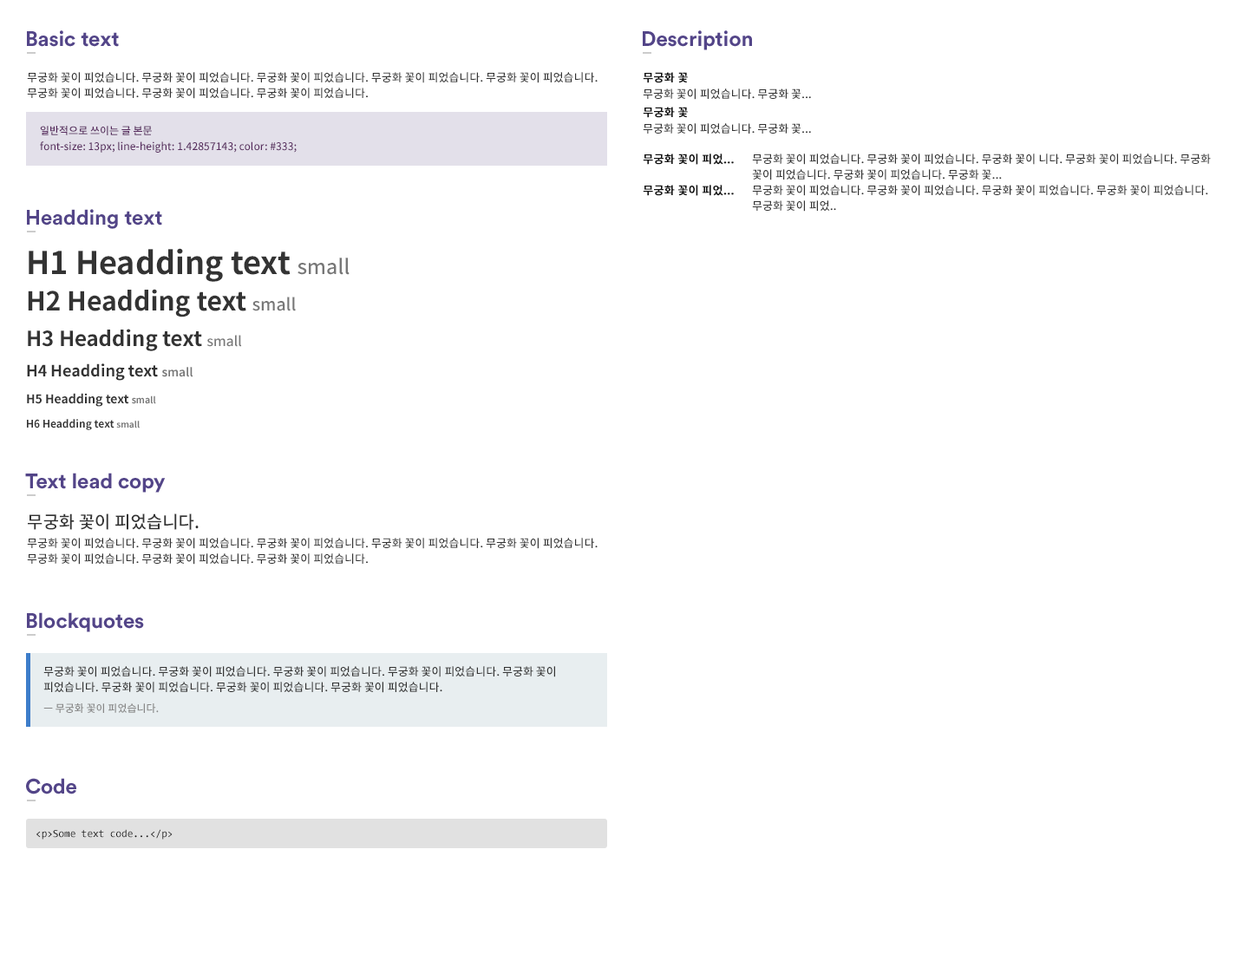
<style>
.page{position:relative;width:1249px;height:954px;background:#ffffff}
.page>*{position:absolute;margin:0}
.t1{font:20.8px "CircularStd-Bold";color:#534588}
.t2{font:11.3px/15.6px "SourceHanSansKR-Medium";color:#333333}
.t3{font:11.3px "SourceHanSansKR-Medium";color:#111111;font-weight:bold}
.t4{font:11.3px "SourceHanSansKR-Medium";color:#333333}
.t5{font:10.4px/15.6px "SourceHanSansKR-Medium";color:#582c5f}
.t6{font:31.2px/36.4px "SourceHanSansKR-Bold";color:#333333}
.t7{font:20.3px/36.4px "SourceHanSansKR-Medium";color:#777777}
.t8{font:26px/36.4px "SourceHanSansKR-Bold";color:#333333}
.t9{font:16.9px/36.4px "SourceHanSansKR-Medium";color:#777777}
.t10{font:20.8px/35.6px "SourceHanSansKR-Bold";color:#333333}
.t11{font:13.5px/35.6px "SourceHanSansKR-Medium";color:#777777}
.t12{font:15.6px/30.4px "SourceHanSansKR-Bold";color:#333333}
.t13{font:11.7px/30.4px "SourceHanSansKR-Bold";color:#777777}
.t14{font:12.1px/26.9px "SourceHanSansKR-Bold";color:#333333}
.t15{font:9.1px/26.9px "SourceHanSansKR-Bold";color:#777777}
.t16{font:10.4px/24.3px "SourceHanSansKR-Bold";color:#333333}
.t17{font:8.7px/24.3px "SourceHanSansKR-Bold";color:#777777}
.t18{font:17.4px "SourceHanSansKR-Medium";color:#333333}
.t19{font:10.4px "SourceHanSansKR-Medium";color:#888888}
.t20{font:10.4px "Consolas";color:#111111}
</style>
<div class="page">
<p class="t1" style="left:27px;top:30px;width:92px;height:17px">Basic text</p>
<p class="t1" style="left:643px;top:30px;width:109px;height:20px">Description</p>
<p class="t2" style="left:27px;top:72px;width:571px;height:27px">무궁화 꽃이 피었습니다. 무궁화 꽃이 피었습니다. 무궁화 꽃이 피었습니다. 무궁화 꽃이 피었습니다. 무궁화 꽃이 피었습니다. 무궁화 꽃이 피었습니다. 무궁화 꽃이 피었습니다. 무궁화 꽃이 피었습니다.</p>
<p class="t3" style="left:643px;top:72px;width:45px;height:11px">무궁화 꽃</p>
<p class="t4" style="left:643px;top:88px;width:168px;height:12px">무궁화 꽃이 피었습니다. 무궁화 꽃...</p>
<p class="t3" style="left:643px;top:107px;width:45px;height:11px">무궁화 꽃</p>
<p class="t5" style="left:40px;top:126px;width:257px;height:27px">일반적으로 쓰이는 글 본문<br>font-size: 13px; line-height: 1.42857143; color: #333;</p>
<p class="t4" style="left:643px;top:123px;width:168px;height:11px">무궁화 꽃이 피었습니다. 무궁화 꽃...</p>
<p class="t3" style="left:643px;top:154px;width:91px;height:11px">무궁화 꽃이 피었...</p>
<p class="t2" style="left:752px;top:154px;width:459px;height:26px">무궁화 꽃이 피었습니다. 무궁화 꽃이 피었습니다. 무궁화 꽃이 니다. 무궁화 꽃이 피었습니다. 무궁화 꽃이 피었습니다. 무궁화 꽃이 피었습니다. 무궁화 꽃...</p>
<p class="t3" style="left:643px;top:185px;width:91px;height:11px">무궁화 꽃이 피었...</p>
<p class="t2" style="left:752px;top:185px;width:457px;height:27px">무궁화 꽃이 피었습니다. 무궁화 꽃이 피었습니다. 무궁화 꽃이 피었습니다. 무궁화 꽃이 피었습니다. 무궁화 꽃이 피었..</p>
<p class="t1" style="left:27px;top:209px;width:135px;height:20px">Headding text</p>
<p class="t6" style="left:27px;top:248px;width:323px;height:182px">H1 Headding text <span class="t7">small<br></span><span class="t8">H2 Headding text </span><span class="t9">small<br></span><span class="t10">H3 Headding text </span><span class="t11">small<br></span><span class="t12">H4 Headding text </span><span class="t13">small<br></span><span class="t14">H5 Headding text </span><span class="t15">small<br></span><span class="t16">H6 Headding text </span><span class="t17">small</span></p>
<p class="t1" style="left:25px;top:473px;width:141px;height:20px">Text lead copy</p>
<p class="t18" style="left:28px;top:514px;width:171px;height:16px">무궁화 꽃이 피었습니다.</p>
<p class="t2" style="left:27px;top:538px;width:571px;height:27px">무궁화 꽃이 피었습니다. 무궁화 꽃이 피었습니다. 무궁화 꽃이 피었습니다. 무궁화 꽃이 피었습니다. 무궁화 꽃이 피었습니다. 무궁화 꽃이 피었습니다. 무궁화 꽃이 피었습니다. 무궁화 꽃이 피었습니다.</p>
<p class="t1" style="left:27px;top:613px;width:117px;height:20px">Blockquotes</p>
<p class="t2" style="left:43px;top:666px;width:512px;height:27px">무궁화 꽃이 피었습니다. 무궁화 꽃이 피었습니다. 무궁화 꽃이 피었습니다. 무궁화 꽃이 피었습니다. 무궁화 꽃이 피었습니다. 무궁화 꽃이 피었습니다. 무궁화 꽃이 피었습니다. 무궁화 꽃이 피었습니다.</p>
<p class="t19" style="left:43px;top:704px;width:116px;height:9px">ㅡ 무궁화 꽃이 피었습니다.</p>
<p class="t1" style="left:26px;top:778px;width:50px;height:17px">Code</p>
<p class="t20" style="left:36px;top:829px;width:137px;height:11px">&lt;p&gt;Some text code...&lt;/p&gt;</p>
</div>
